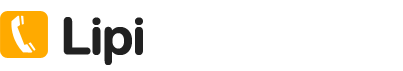
<style>
.page{position:relative;width:403px;height:71px;background:#ffffff}
.page>*{position:absolute;margin:0}
.t1{font:50px "ArialRoundedMTBold";letter-spacing:-0.05em;color:#212121;font-weight:bold}
</style>
<div class="page">
<p class="t1" style="left:63px;top:17px;width:80px;height:48px">Lipi</p>
</div>
